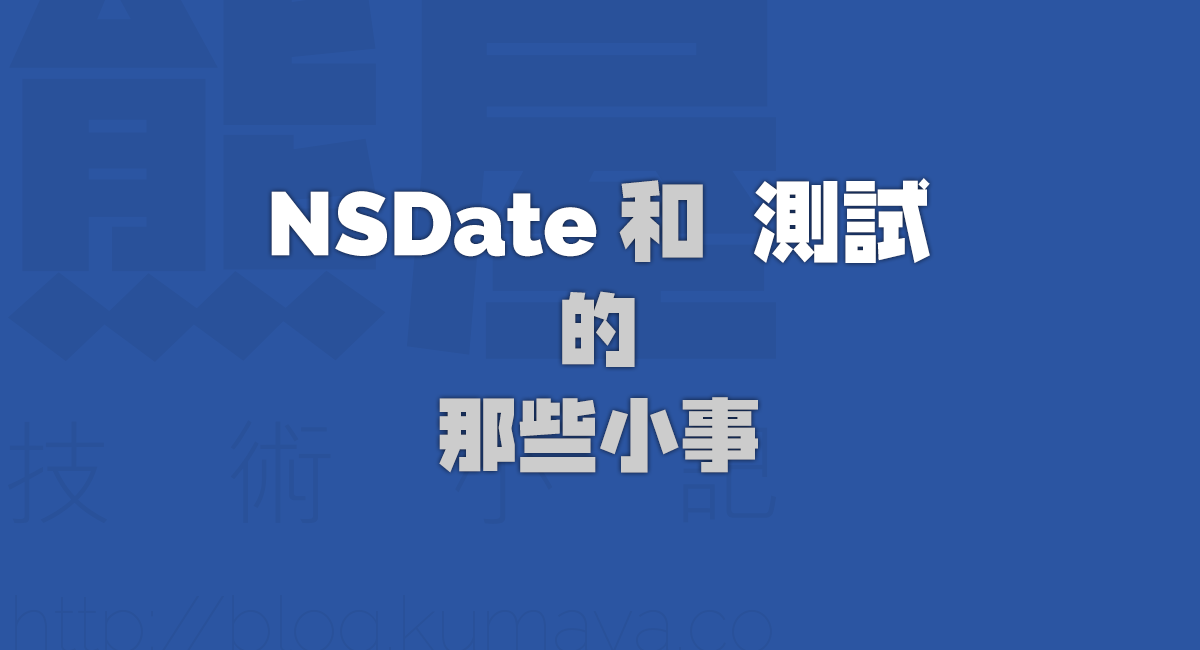
<style>
.page{position:relative;width:1200px;height:650px;background:#2b55a2}
.page>*{position:absolute;margin:0}
.t1{font:89.3px/84.4px "Raleway-Heavy";color:#ffffff}
.t2{font:89.3px/84.4px "NIS-Z10-83pv-RKSJ-H";color:#cccccc}
.t3{font:89.3px/84.4px "NIS-Z10-83pv-RKSJ-H";color:#ffffff}
.t4{font:81px/105.2px "NIS-Z10-83pv-RKSJ-H";color:#cccccc}
</style>
<div class="page">
<p class="t1" style="left:271px;top:178px;width:659px;height:295px;text-align:center">NSDate <span class="t2">和</span><span class="t3"> 測試<br></span><span class="t4">的<br>那些小事</span></p>
</div>
